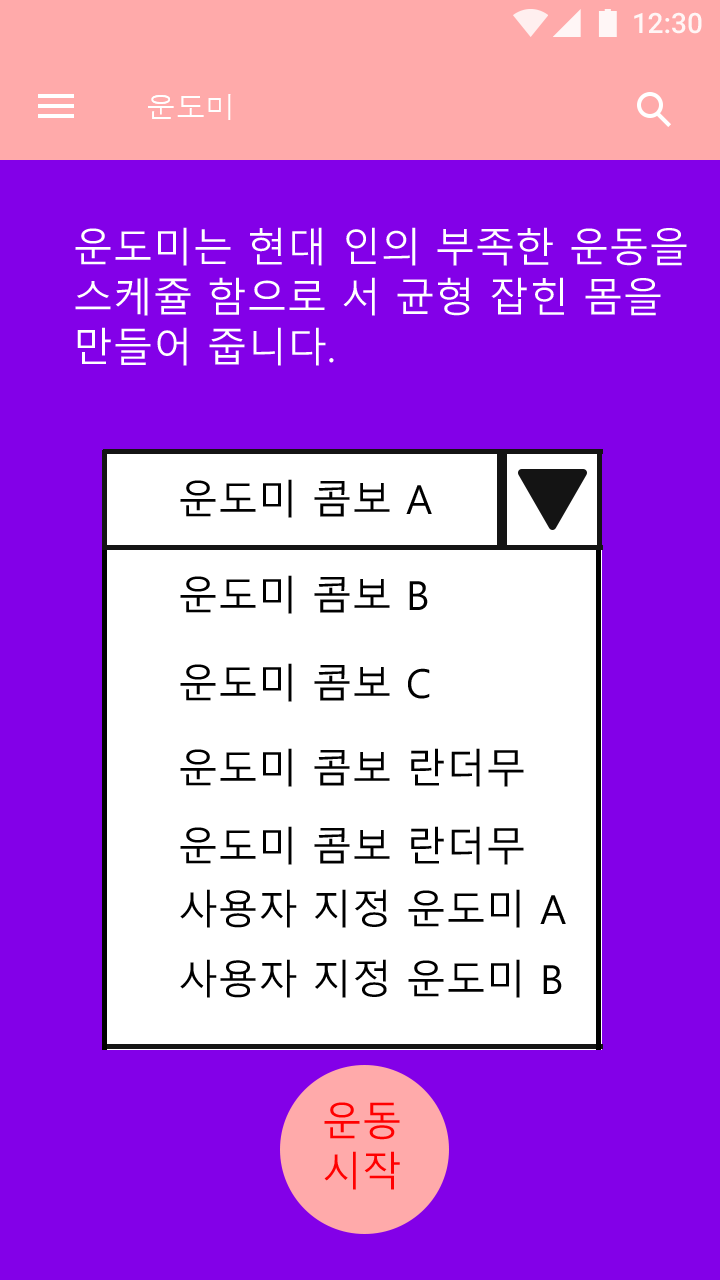
<style>
.page{position:relative;width:720px;height:1280px;background:#8300e8}
.page>*{position:absolute;margin:0}
.t1{font:30px "Dotum";color:#ffffff}
.t2{font:40px/50px "MalgunGothic";color:#ffffff}
.t3{font:40px "MalgunGothic";color:#000000}
.t4{font:40px/50px "MalgunGothic";color:#ff0000}
</style>
<div class="page">
<p class="t1" style="left:148px;top:94px;width:83px;height:26px">운도미</p>
<p class="t2" style="left:75px;top:227px;width:612px;height:139px">운도미는 현대 인의 부족한 운동을<br>스케쥴 함으로 서 균형 잡힌 몸을 <br>만들어 줍니다.</p>
<p class="t3" style="left:180px;top:479px;width:252px;height:39px">운도미 콤보 A</p>
<p class="t3" style="left:180px;top:575px;width:248px;height:39px">운도미 콤보 B</p>
<p class="t3" style="left:180px;top:663px;width:250px;height:39px">운도미 콤보 C</p>
<p class="t3" style="left:180px;top:748px;width:344px;height:39px">운도미 콤보 란더무</p>
<p class="t3" style="left:180px;top:826px;width:344px;height:39px">운도미 콤보 란더무</p>
<p class="t3" style="left:180px;top:889px;width:386px;height:39px">사용자 지정 운도미 A</p>
<p class="t3" style="left:180px;top:959px;width:382px;height:39px">사용자 지정 운도미 B</p>
<p class="t4" style="left:324px;top:1102px;width:76px;height:88px">운동 <br>시작</p>
</div>
